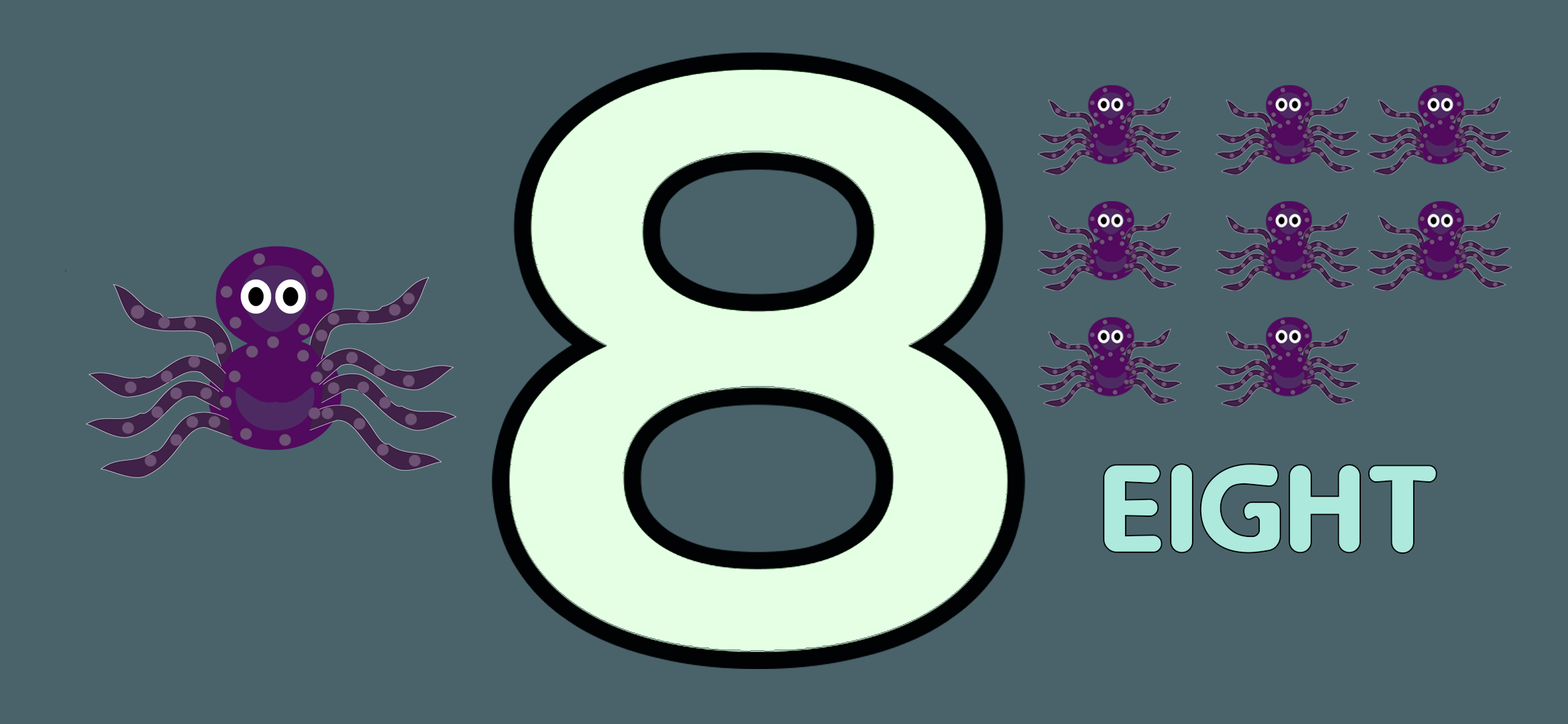
<style>
.page{position:relative;width:1568px;height:724px;background:#4a636b}
.page>*{position:absolute;margin:0}
.t1{font:139.6px "Dyuthi";color:#ade9dd}
</style>
<div class="page">
<p class="t1" style="left:1104px;top:464px;width:332px;height:89px">EIGHT</p>
</div>
